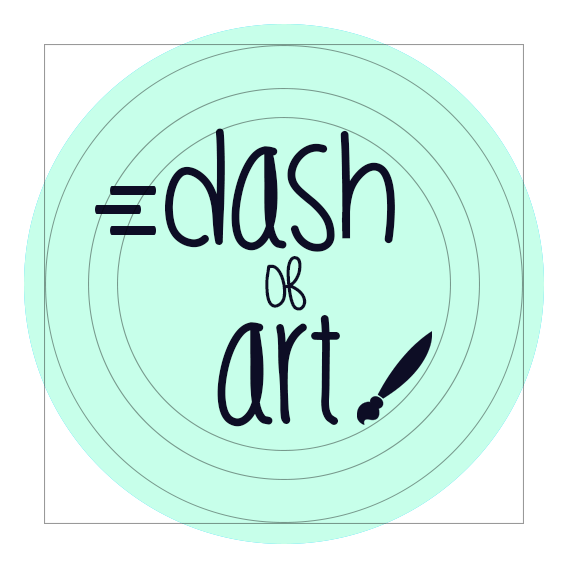
<style>
.page{position:relative;width:568px;height:568px;background:#c7ffea}
.page>*{position:absolute;margin:0}
.t1{font:150px "LilTastyGoods";letter-spacing:0.01em;color:#0d0d25}
.t2{font:62.5px "LilTastyGoods";letter-spacing:0.01em;color:#0d0d25}
</style>
<div class="page">
<p class="t1" style="left:165px;top:128px;width:230px;height:124px">DASH</p>
<p class="t2" style="left:265px;top:256px;width:42px;height:55px">of</p>
<p class="t1" style="left:217px;top:315px;width:123px;height:112px">ART</p>
</div>
